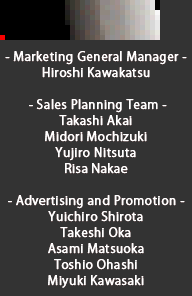
<style>
.page{position:relative;width:192px;height:296px;background:#333333}
.page>*{position:absolute;margin:0}
.t1{font:12px/16px "KozGoPr6N-Regular";letter-spacing:0.025em;color:#ffffff;font-weight:bold}
</style>
<div class="page">
<p class="t1" style="left:5px;top:51px;width:182px;height:237px;text-align:center">- Marketing General Manager -<br>Hiroshi Kawakatsu<br><br> - Sales Planning Team -<br>Takashi Akai<br>Midori Mochizuki<br>Yujiro Nitsuta<br>Risa Nakae<br><br>- Advertising and Promotion -<br>Yuichiro Shirota<br>Takeshi Oka<br>Asami Matsuoka<br>Toshio Ohashi<br>Miyuki Kawasaki</p>
</div>
